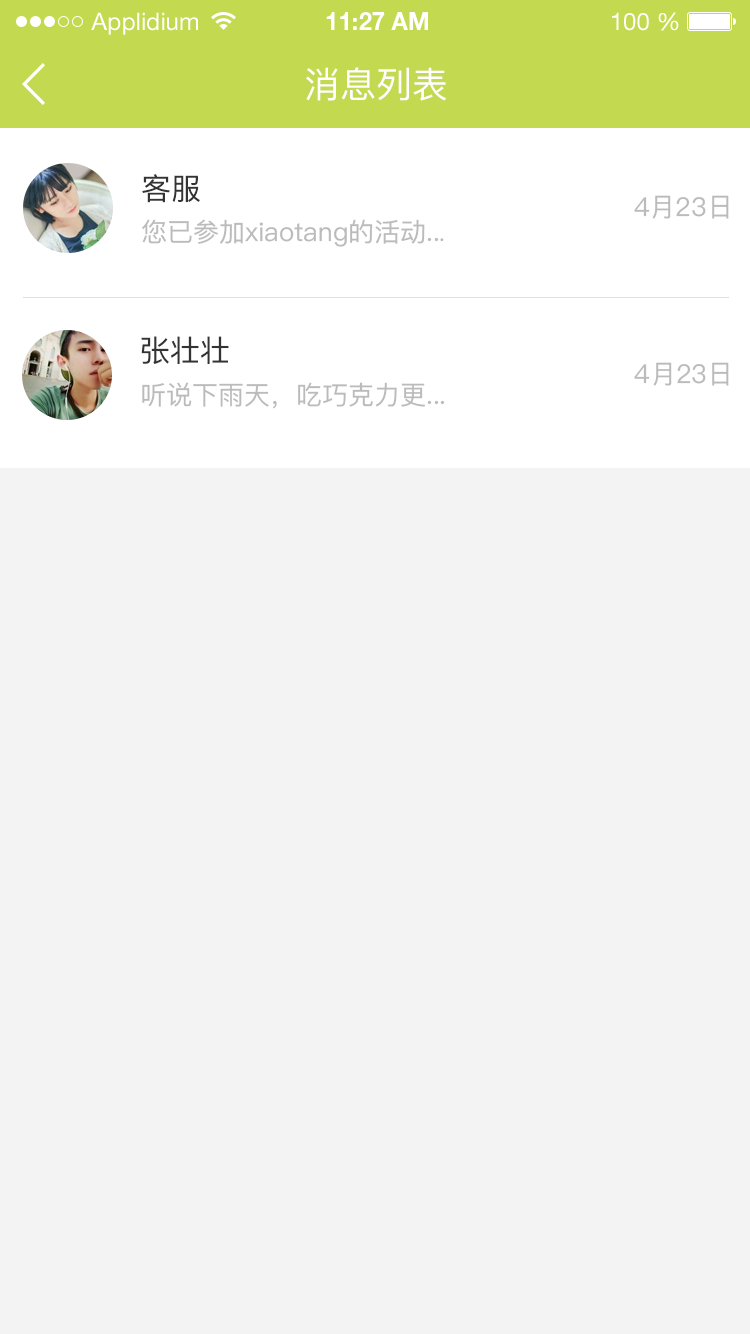
<style>
.page{position:relative;width:750px;height:1334px;background:#f3f3f3}
.page>*{position:absolute;margin:0}
.t1{font:24px "HelveticaNeueLTStd-Roman";color:#ffffff}
.t2{font:24px "HelveticaNeueLTStd-Bd";color:#ffffff}
.t3{font:36px "PingFangSC-Regular";color:#ffffff}
.t4{font:30px "PingFangSC-Regular";color:#333333}
.t5{font:26px "PingFangSC-Regular";color:#bbbbbb}
.t6{font:22px "PingFangSC-Regular";color:#bbbbbb}
</style>
<div class="page">
<p class="t1" style="left:91px;top:12px;width:107px;height:23px">Applidium</p>
<p class="t2" style="left:326px;top:12px;width:102px;height:18px">11:27 AM</p>
<p class="t1" style="left:612px;top:12px;width:67px;height:19px">100 %</p>
<p class="t3" style="left:306px;top:67px;width:140px;height:34px">消息列表</p>
<p class="t4" style="left:142px;top:174px;width:58px;height:29px">客服</p>
<p class="t5" style="left:634px;top:195px;width:95px;height:24px">4月23日</p>
<p class="t5" style="left:142px;top:219px;width:302px;height:28px">您已参加xiaotang的活动..<span class="t6">.</span></p>
<p class="t4" style="left:141px;top:336px;width:88px;height:28px">张壮壮</p>
<p class="t5" style="left:634px;top:362px;width:95px;height:24px">4月23日</p>
<p class="t5" style="left:142px;top:382px;width:303px;height:27px">听说下雨天，吃巧克力更...</p>
</div>
